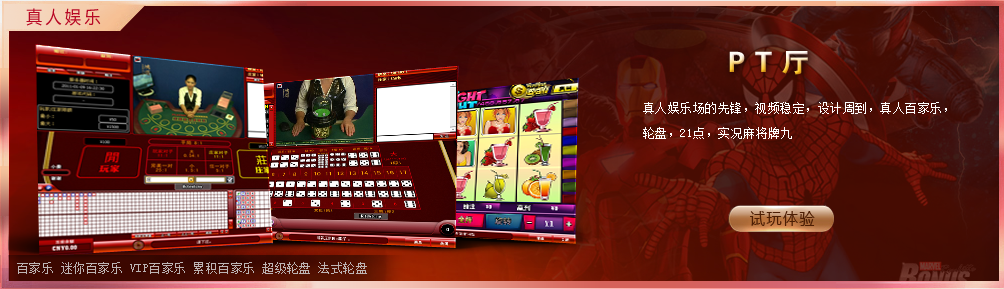
<style>
.page{position:relative;width:1004px;height:289px}
.page>*{position:absolute;margin:0}
.t1{font:17.6px "MicrosoftYaHei";letter-spacing:0.22em;color:#b80624;scale:0.91 1}
.t2{font:28px "FZDHTJW--GB1-0";letter-spacing:0.35em}
.t3{font:12px/25px "SimSun";letter-spacing:0.04em;color:#ffffff}
.t4{font:15.8px "MicrosoftYaHei";letter-spacing:0.1em;color:#4d1e04;scale:0.95 1}
.t5{font:12px "SimSun";letter-spacing:0.04em;color:#bdb4b4}
</style>
<div class="page">
<p class="t1" style="left:26px;top:8px;width:75px;height:18px">真人娱乐</p>
<p class="t2" style="left:729px;top:51px;width:79px;height:24px">PT厅</p>
<p class="t3" style="left:643px;top:102px;width:304px;height:37px">真人娱乐场的先锋，视频稳定，设计周到，真人百家乐，<br>轮盘，21点，实况麻将牌九</p>
<p class="t4" style="left:750px;top:211px;width:65px;height:15px">试玩体验</p>
<p class="t5" style="left:17px;top:262px;width:350px;height:12px">百家乐 迷你百家乐 VIP百家乐 累积百家乐 超级轮盘 法式轮盘</p>
</div>
